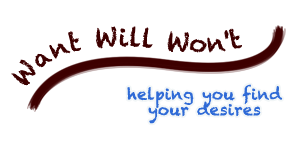
<style>
.page{position:relative;width:300px;height:145px;background:#ffffff}
.page>*{position:absolute;margin:0}
.t1{font:24.9px/11.4px "Chalkduster";letter-spacing:0.025em;color:#3d0000}
.t2{font:15.5px/15.5px "Chalkduster";letter-spacing:0.025em;color:#2f6ad6}
</style>
<div class="page">
<p class="t1" style="left:11px;top:26px;width:231px;height:60px">Want Will Won't</p>
<p class="t2" style="left:127px;top:84px;width:156px;height:40px;text-align:center">helping you find<br>your desires</p>
</div>
